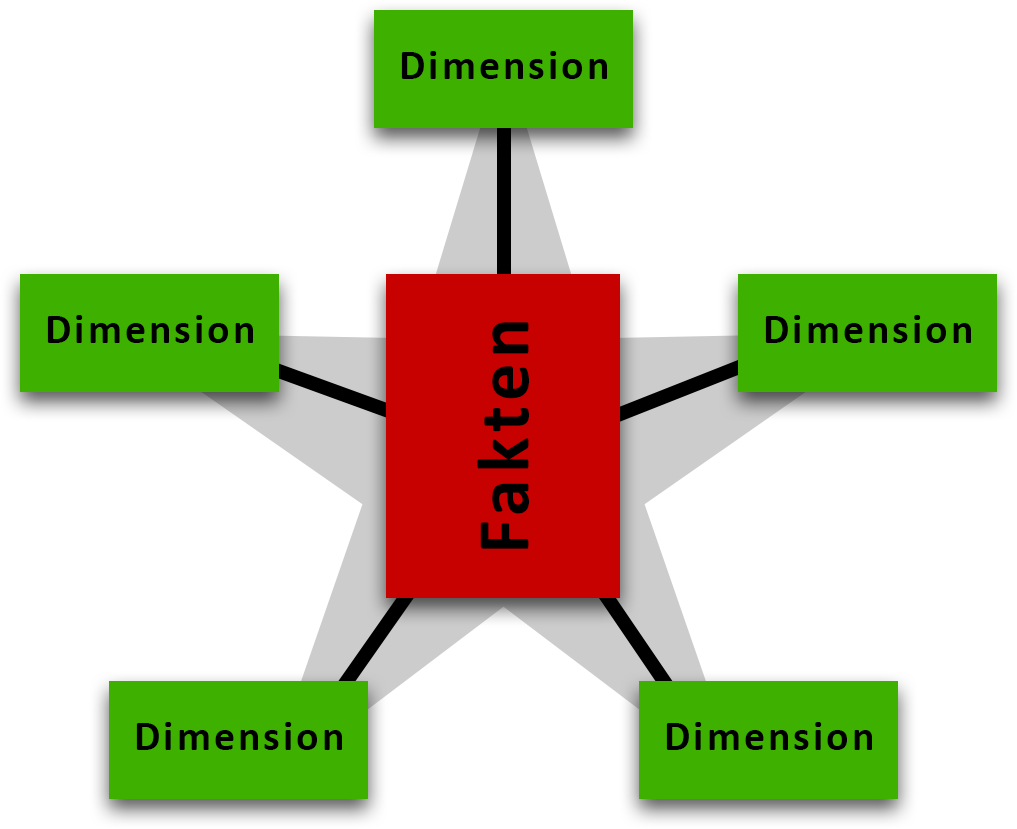
<style>
.page{position:relative;width:1017px;height:829px;background:#ffffff}
.page>*{position:absolute;margin:0}
.t1{font:41.7px "Calibri-Bold";letter-spacing:0.075em;color:#000000}
.t2{font:75px "Calibri-Bold";letter-spacing:0.075em;color:#000000}
</style>
<div class="page">
<p class="t1" style="left:401px;top:51px;width:206px;height:28px">Dimension</p>
<p class="t1" style="left:47px;top:315px;width:206px;height:28px">Dimension</p>
<p class="t1" style="left:765px;top:315px;width:206px;height:28px">Dimension</p>
<p class="t2" style="left:477px;top:322px;width:52px;height:227px;rotate:-90deg">Fakten</p>
<p class="t1" style="left:136px;top:722px;width:206px;height:28px">Dimension</p>
<p class="t1" style="left:666px;top:722px;width:206px;height:28px">Dimension</p>
</div>
